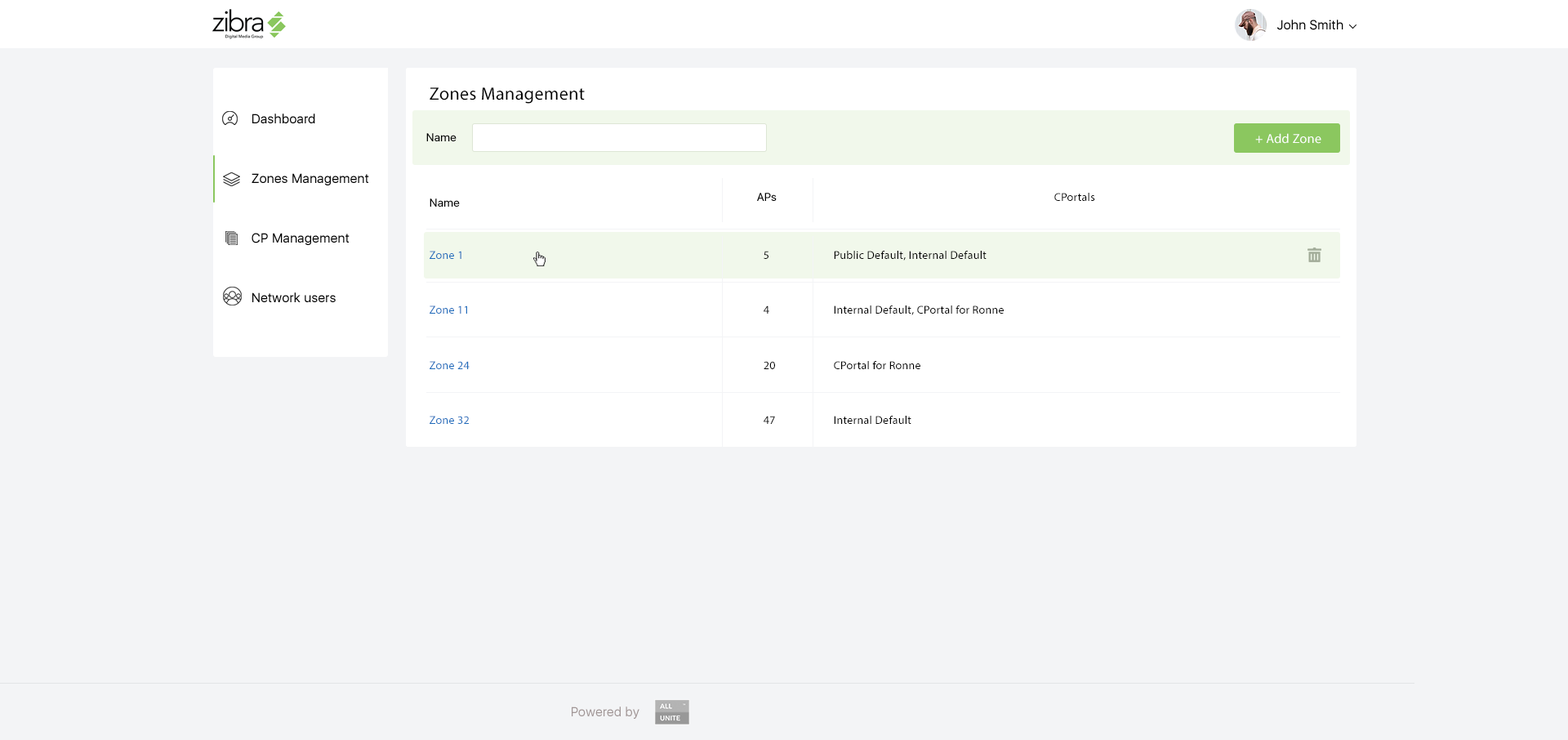
<style>
.page{position:relative;width:1568px;height:740px;background:#f3f4f6}
.page>*{position:absolute;margin:0}
.t1{font:13.1px "SFUIDisplay-Regular";letter-spacing:0.02em;color:#000000}
.t2{font:18px "MyriadPro-Regular";letter-spacing:0.02em;color:#000000}
.t3{font:13.1px/59.6px "SFUIDisplay-Regular";letter-spacing:0.02em;color:#000000}
.t4{font:11.4px "SFUIDisplay-Regular";letter-spacing:0.02em;color:#000000}
.t5{font:13.1px "MyriadPro-Regular";letter-spacing:0.02em;color:#ffffff}
.t6{font:11.4px "MyriadPro-Regular";letter-spacing:0.02em;color:#000000}
.t7{font:11.4px "MyriadPro-Regular";letter-spacing:0.02em;color:#206dbc}
.t8{font:13.1px "SFUIDisplay-Regular";letter-spacing:0.02em;color:#a19696}
</style>
<div class="page">
<p class="t1" style="left:1277px;top:20px;width:66px;height:10px">John Smith</p>
<p class="t2" style="left:430px;top:87px;width:155px;height:17px">Zones Management</p>
<p class="t3" style="left:252px;top:114px;width:117px;height:188px;text-align:right">Dashboard<br>Zones Management<br>CP Management<br>Network users</p>
<p class="t4" style="left:426px;top:133px;width:31px;height:8px">Name</p>
<p class="t5" style="left:1255px;top:133px;width:66px;height:11px">Add Zone +</p>
<p class="t4" style="left:757px;top:193px;width:20px;height:8px">APs</p>
<p class="t6" style="left:1054px;top:193px;width:41px;height:8px">CPortals</p>
<p class="t4" style="left:430px;top:198px;width:30px;height:9px">Name</p>
<p class="t7" style="left:430px;top:251px;width:31px;height:8px">Zone 1</p>
<p class="t6" style="left:764px;top:251px;width:4px;height:8px">5</p>
<p class="t6" style="left:834px;top:251px;width:153px;height:10px">Public Default, Internal Default</p>
<p class="t7" style="left:430px;top:305px;width:37px;height:9px">Zone 11</p>
<p class="t6" style="left:764px;top:305px;width:5px;height:9px">4</p>
<p class="t6" style="left:834px;top:305px;width:170px;height:10px">Internal Default, CPortal for Ronne</p>
<p class="t7" style="left:430px;top:361px;width:40px;height:8px">Zone 24</p>
<p class="t6" style="left:764px;top:361px;width:11px;height:8px">20</p>
<p class="t6" style="left:834px;top:361px;width:86px;height:8px">CPortal for Ronne</p>
<p class="t7" style="left:430px;top:416px;width:39px;height:8px">Zone 32</p>
<p class="t6" style="left:764px;top:416px;width:11px;height:8px">47</p>
<p class="t6" style="left:834px;top:416px;width:77px;height:8px">Internal Default</p>
<p class="t8" style="left:572px;top:706px;width:67px;height:13px">Powered by</p>
</div>
